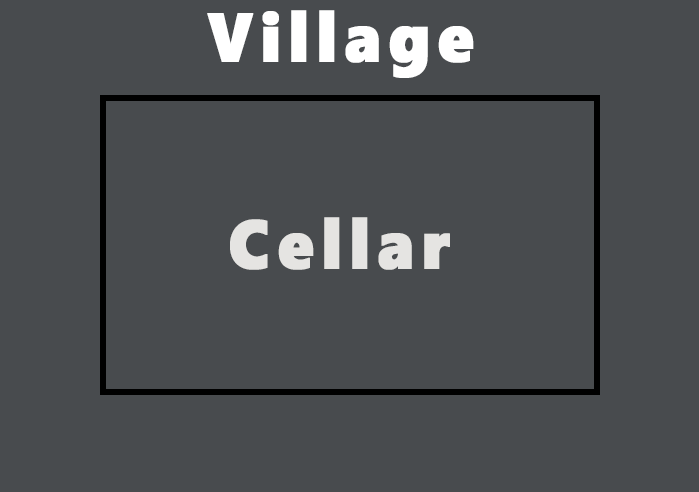
<style>
.page{position:relative;width:699px;height:492px;background:#484b4e}
.page>*{position:absolute;margin:0}
.t1{font:68.5px "SegoeWP-Black";letter-spacing:0.1em;color:#ffffff;font-weight:bold;scale:0.93 1}
.t2{font:68.5px "SegoeWP-Black";letter-spacing:0.1em;color:#e5e4e2;font-weight:bold;scale:0.93 1}
</style>
<div class="page">
<p class="t1" style="left:207px;top:10px;width:267px;height:68px">Village</p>
<p class="t2" style="left:230px;top:217px;width:220px;height:53px">Cellar</p>
</div>
